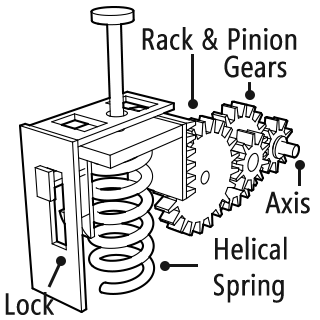
<style>
.page{position:relative;width:320px;height:320px;background:#ffffff}
.page>*{position:absolute;margin:0}
.t1{font:30px "SegoeCondensed";color:#171717;font-weight:bold}
</style>
<div class="page">
<p class="t1" style="left:142px;top:27px;width:155px;height:23px">Rack &amp; Pinion</p>
<p class="t1" style="left:224px;top:55px;width:63px;height:23px">Gears</p>
<p class="t1" style="left:265px;top:191px;width:45px;height:23px">Axis</p>
<p class="t1" style="left:214px;top:236px;width:73px;height:67px">Helical<br>Spring</p>
<p class="t1" style="left:5px;top:292px;width:49px;height:23px">Lock</p>
</div>
